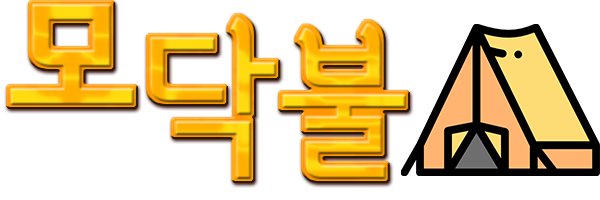
<style>
.page{position:relative;width:600px;height:200px;background:#ffffff}
.page>*{position:absolute;margin:0}
.t1{font:166.7px "SangSangTitleM"}
.t2{font:166.7px "SangSangTitleB"}
</style>
<div class="page">
<p class="t1" style="left:11px;top:5px;width:394px;height:173px"><span class="t2">모</span>닥불</p>
</div>
